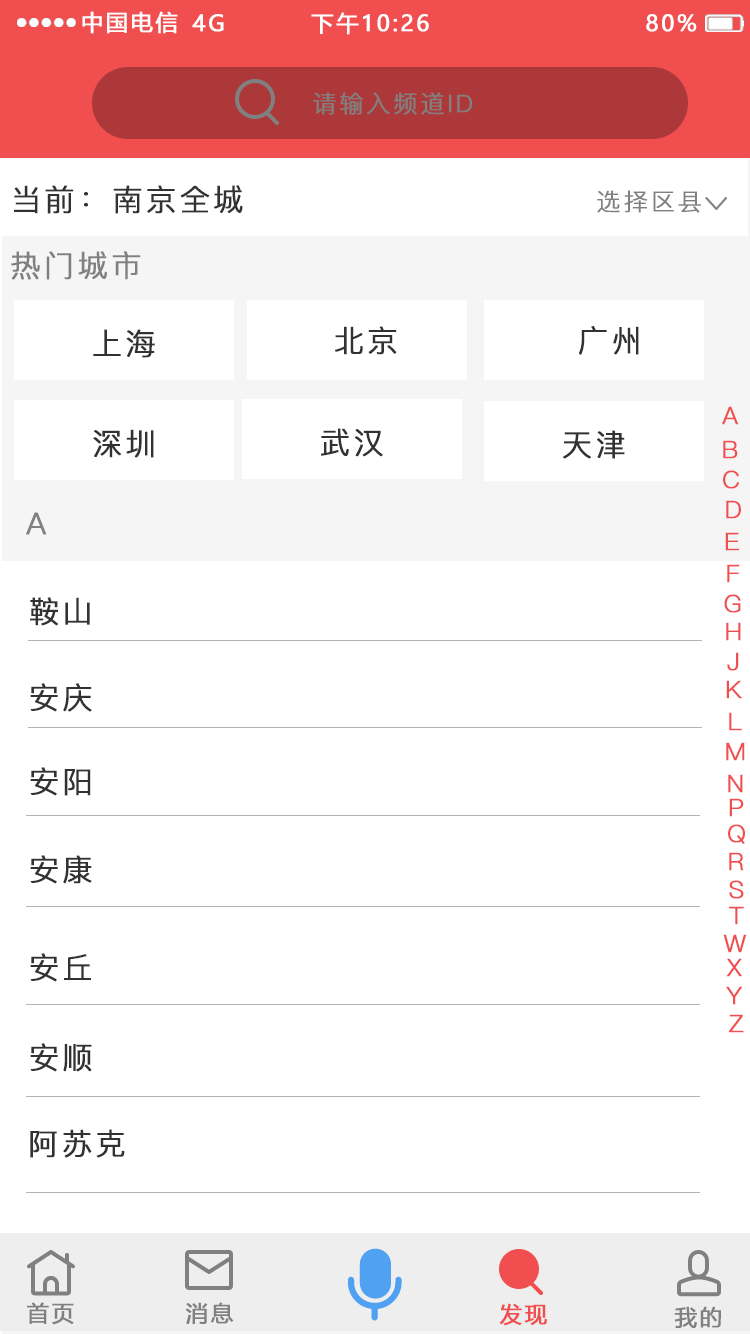
<style>
.page{position:relative;width:750px;height:1334px;background:#ffffff}
.page>*{position:absolute;margin:0}
.t1{font:22px "MicrosoftYaHei";letter-spacing:0.1em;color:#ffffff;text-transform:uppercase;font-weight:bold}
.t2{font:24px "PingFang-SC-Regular";letter-spacing:0.1em;color:#808080;text-transform:uppercase;font-weight:bold}
.t3{font:30px "PingFang-SC-Regular";letter-spacing:0.1em;color:#323233;text-transform:uppercase;font-weight:bold}
.t4{font:30px "PingFang-SC-Regular";letter-spacing:0.1em;color:#808080;text-transform:uppercase;font-weight:bold}
.t5{font:24px "PingFang-SC-Regular";letter-spacing:0.1em;color:#f04e4f;text-transform:uppercase;font-weight:bold}
.t6{font:22px "MicrosoftYaHei";letter-spacing:0.1em;color:#808080;text-transform:uppercase;font-weight:bold}
.t7{font:22px "MicrosoftYaHei";letter-spacing:0.1em;color:#f04e4f;text-transform:uppercase;font-weight:bold}
</style>
<div class="page">
<p class="t1" style="left:82px;top:11px;width:96px;height:23px">中国电信</p>
<p class="t1" style="left:192px;top:14px;width:32px;height:18px">4G</p>
<p class="t1" style="left:311px;top:12px;width:118px;height:23px">下午10:26</p>
<p class="t1" style="left:646px;top:14px;width:51px;height:18px">80%</p>
<p class="t2" style="left:313px;top:92px;width:159px;height:23px">请输入频道ID</p>
<p class="t3" style="left:14px;top:185px;width:229px;height:29px">当前：南京全城</p>
<p class="t2" style="left:597px;top:190px;width:104px;height:23px">选择区县</p>
<p class="t4" style="left:11px;top:251px;width:130px;height:29px">热门城市</p>
<p class="t3" style="left:93px;top:329px;width:62px;height:29px">上海</p>
<p class="t3" style="left:335px;top:326px;width:62px;height:29px">北京</p>
<p class="t3" style="left:579px;top:326px;width:60px;height:29px">广州</p>
<p class="t5" style="left:722px;top:406px;width:17px;height:19px">A</p>
<p class="t3" style="left:93px;top:429px;width:61px;height:29px">深圳</p>
<p class="t3" style="left:321px;top:428px;width:62px;height:29px">武汉</p>
<p class="t3" style="left:563px;top:430px;width:62px;height:29px">天津</p>
<p class="t5" style="left:723px;top:440px;width:15px;height:19px">B</p>
<p class="t5" style="left:723px;top:470px;width:16px;height:19px">C</p>
<p class="t5" style="left:726px;top:500px;width:15px;height:19px">D</p>
<p class="t4" style="left:26px;top:512px;width:21px;height:23px">A</p>
<p class="t5" style="left:725px;top:532px;width:14px;height:19px">E</p>
<p class="t5" style="left:727px;top:564px;width:13px;height:19px">F</p>
<p class="t3" style="left:30px;top:597px;width:60px;height:29px">鞍山</p>
<p class="t5" style="left:724px;top:594px;width:17px;height:19px">G</p>
<p class="t5" style="left:726px;top:622px;width:15px;height:19px">H</p>
<p class="t5" style="left:727px;top:652px;width:12px;height:19px">J</p>
<p class="t3" style="left:30px;top:683px;width:62px;height:29px">安庆</p>
<p class="t5" style="left:726px;top:680px;width:16px;height:19px">K</p>
<p class="t5" style="left:729px;top:712px;width:13px;height:19px">L</p>
<p class="t5" style="left:726px;top:742px;width:19px;height:19px">M</p>
<p class="t3" style="left:30px;top:767px;width:61px;height:29px">安阳</p>
<p class="t5" style="left:728px;top:774px;width:15px;height:19px">N</p>
<p class="t5" style="left:729px;top:798px;width:15px;height:19px">P</p>
<p class="t5" style="left:728px;top:824px;width:17px;height:20px">Q</p>
<p class="t3" style="left:30px;top:855px;width:62px;height:29px">安康</p>
<p class="t5" style="left:729px;top:852px;width:15px;height:19px">R</p>
<p class="t5" style="left:729px;top:880px;width:15px;height:19px">S</p>
<p class="t5" style="left:729px;top:906px;width:15px;height:19px">T</p>
<p class="t5" style="left:723px;top:934px;width:24px;height:19px">W</p>
<p class="t3" style="left:30px;top:953px;width:61px;height:29px">安丘</p>
<p class="t5" style="left:726px;top:958px;width:16px;height:19px">X</p>
<p class="t5" style="left:726px;top:986px;width:16px;height:19px">Y</p>
<p class="t5" style="left:729px;top:1014px;width:15px;height:19px">Z</p>
<p class="t3" style="left:30px;top:1043px;width:62px;height:29px">安顺</p>
<p class="t3" style="left:30px;top:1129px;width:95px;height:29px">阿苏克</p>
<p class="t6" style="left:27px;top:1302px;width:47px;height:23px">首页</p>
<p class="t6" style="left:185px;top:1302px;width:49px;height:22px">消息</p>
<p class="t7" style="left:499px;top:1303px;width:48px;height:23px">发现</p>
<p class="t6" style="left:674px;top:1306px;width:47px;height:22px">我的</p>
</div>
